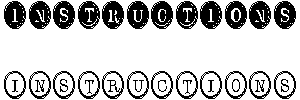
<style>
.page{position:relative;width:300px;height:100px;background:#ffffff}
.page>*{position:absolute;margin:0}
.t1{font:37.5px "TypeKeysFilled";color:#000000;scale:0.81 1}
.t2{font:37.5px "TypeKeys";color:#000000;scale:0.81 1}
</style>
<div class="page">
<p class="t1" style="left:4px;top:1px;width:292px;height:28px">instructions</p>
<p class="t2" style="left:4px;top:71px;width:292px;height:28px">instructions</p>
</div>
